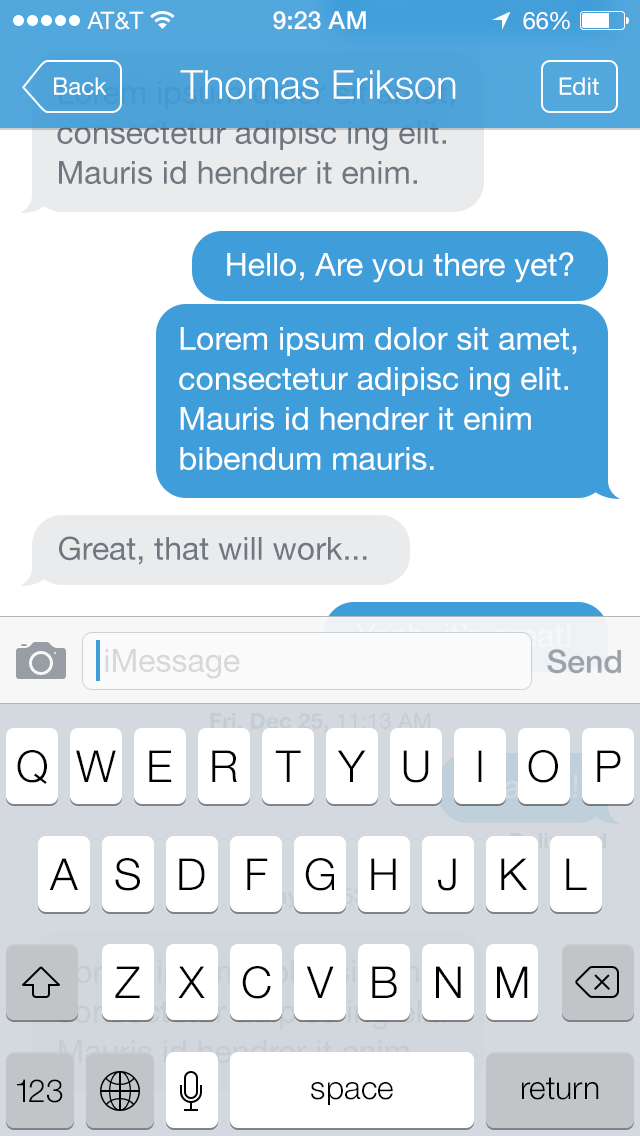
<style>
.page{position:relative;width:640px;height:1136px;background:#ffffff}
.page>*{position:absolute;margin:0}
.t1{font:24px "HelveticaNeue";color:#ffffff}
.t2{font:25px "HelveticaNeue-Medium";color:#ffffff}
.t3{font:24px "HelveticaNeue";letter-spacing:-0.02em;color:#ffffff}
.t4{font:40px "HelveticaNeue-Light";color:#ffffff}
.t5{font:32px/40px "HelveticaNeue";color:#6f7881}
.t6{font:32px "HelveticaNeue";color:#ffffff}
.t7{font:32px/40px "HelveticaNeue";color:#ffffff}
.t8{font:32px "HelveticaNeue";color:#6f7881}
.t9{font:32px "HelveticaNeue";color:#d6d8da}
.t10{font:32px "HelveticaNeue-Medium";color:#9ba2a9}
.t11{font:22px "HelveticaNeue-Bold";letter-spacing:0.01em;color:#c5ccd2}
.t12{font:22px "HelveticaNeue";letter-spacing:0.01em;color:#c5ccd2}
.t13{font:44px "HelveticaNeue-Light";color:#000000}
.t14{font:32px "HelveticaNeue-Light";color:#000000}
.t15{font:32px "HelveticaNeue-Light";letter-spacing:-0.12em;color:#000000}
</style>
<div class="page">
<p class="t1" style="left:87px;top:11px;width:57px;height:19px">AT&amp;T</p>
<p class="t2" style="left:273px;top:11px;width:93px;height:19px">9:23 AM</p>
<p class="t1" style="left:523px;top:11px;width:47px;height:19px">6<span class="t3">6</span>%</p>
<p class="t1" style="left:54px;top:77px;width:53px;height:18px">Back</p>
<p class="t4" style="left:180px;top:70px;width:276px;height:30px">Thomas Erikson</p>
<p class="t1" style="left:559px;top:77px;width:40px;height:18px">Edit</p>
<p class="t5" style="left:57px;top:81px;width:398px;height:103px">Lorem ipsum dolor sit amet, consectetur adipisc ing elit. Mauris id hendrer it enim.</p>
<p class="t6" style="left:227px;top:252px;width:347px;height:31px">Hello, Are you there yet?</p>
<p class="t7" style="left:179px;top:327px;width:398px;height:143px">Lorem ipsum dolor sit amet, consectetur adipisc ing elit. Mauris id hendrer it enim bibendum mauris.</p>
<p class="t8" style="left:59px;top:536px;width:308px;height:29px">Great, that will work...</p>
<p class="t9" style="left:105px;top:649px;width:135px;height:30px">iMessage</p>
<p class="t10" style="left:547px;top:649px;width:74px;height:25px">Send</p>
<p class="t11" style="left:210px;top:713px;width:221px;height:20px">Fri, Dec 25, <span class="t12">11:13 AM</span></p>
<p class="t13" style="left:17px;top:750px;width:30px;height:34px">Q</p>
<p class="t13" style="left:76px;top:750px;width:40px;height:32px">W</p>
<p class="t13" style="left:149px;top:750px;width:23px;height:32px">E</p>
<p class="t13" style="left:212px;top:750px;width:25px;height:32px">R</p>
<p class="t13" style="left:275px;top:750px;width:26px;height:32px">T</p>
<p class="t13" style="left:337px;top:750px;width:29px;height:32px">Y</p>
<p class="t13" style="left:403px;top:750px;width:26px;height:33px">U</p>
<p class="t13" style="left:478px;top:750px;width:4px;height:32px">I</p>
<p class="t13" style="left:528px;top:750px;width:30px;height:33px">O</p>
<p class="t13" style="left:597px;top:750px;width:24px;height:32px">P</p>
<p class="t13" style="left:49px;top:858px;width:29px;height:32px">A</p>
<p class="t13" style="left:115px;top:858px;width:25px;height:33px">S</p>
<p class="t13" style="left:179px;top:858px;width:26px;height:32px">D</p>
<p class="t13" style="left:247px;top:858px;width:21px;height:32px">F</p>
<p class="t13" style="left:305px;top:858px;width:29px;height:33px">G</p>
<p class="t13" style="left:371px;top:858px;width:25px;height:32px">H</p>
<p class="t13" style="left:438px;top:858px;width:18px;height:33px">J</p>
<p class="t13" style="left:501px;top:858px;width:27px;height:32px">K</p>
<p class="t13" style="left:566px;top:858px;width:21px;height:32px">L</p>
<p class="t13" style="left:115px;top:966px;width:25px;height:32px">Z</p>
<p class="t13" style="left:178px;top:966px;width:27px;height:32px">X</p>
<p class="t13" style="left:242px;top:966px;width:29px;height:33px">C</p>
<p class="t13" style="left:306px;top:966px;width:28px;height:32px">V</p>
<p class="t13" style="left:372px;top:966px;width:25px;height:32px">B</p>
<p class="t13" style="left:436px;top:966px;width:25px;height:32px">N</p>
<p class="t13" style="left:497px;top:966px;width:31px;height:32px">M</p>
<p class="t14" style="left:17px;top:1079px;width:46px;height:24px"><span class="t15">1</span>23</p>
<p class="t14" style="left:311px;top:1082px;width:82px;height:23px">space</p>
<p class="t14" style="left:522px;top:1077px;width:77px;height:23px">return</p>
</div>
